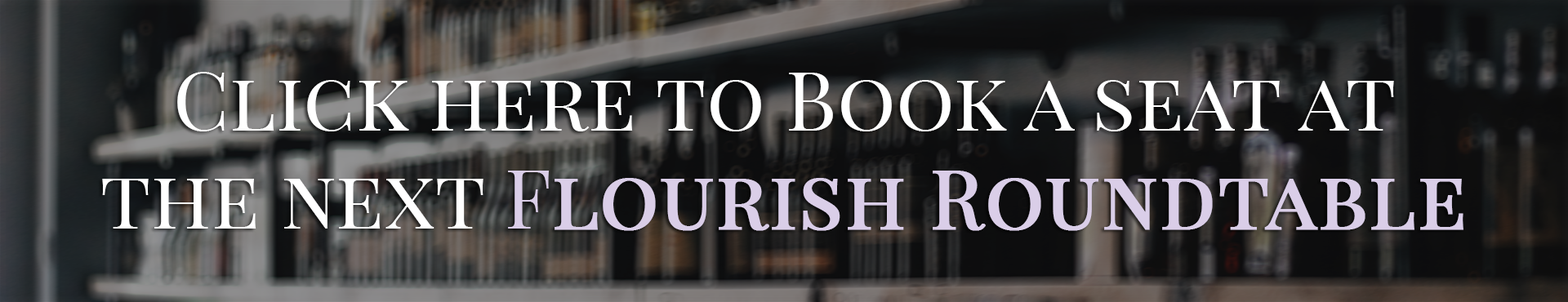
<style>
.page{position:relative;width:1568px;height:302px}
.page>*{position:absolute;margin:0}
.t1{font:81.6px "PlayfairDisplaySC-Regular";color:#ffffff}
.t2{font:81.6px "PlayfairDisplaySC-Regular";color:#dacee8}
.t3{font:81.6px "PlayfairDisplaySC-Regular";color:#dacee8;font-weight:bold}
</style>
<div class="page">
<p class="t1" style="left:102px;top:72px;width:1361px;height:159px;text-align:center">Click here to Book a seat at the next <span class="t2">F</span><span class="t3">lourish Roundtable</span></p>
</div>
